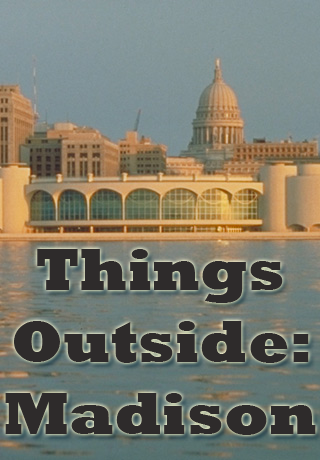
<style>
.page{position:relative;width:320px;height:460px}
.page>*{position:absolute;margin:0}
.t1{font:60px "Rockwell-ExtraBold";color:#2e2b2b}
</style>
<div class="page">
<p class="t1" style="left:5px;top:249px;width:311px;height:186px;text-align:center">Things<br>Outside:<br>Madison</p>
</div>
